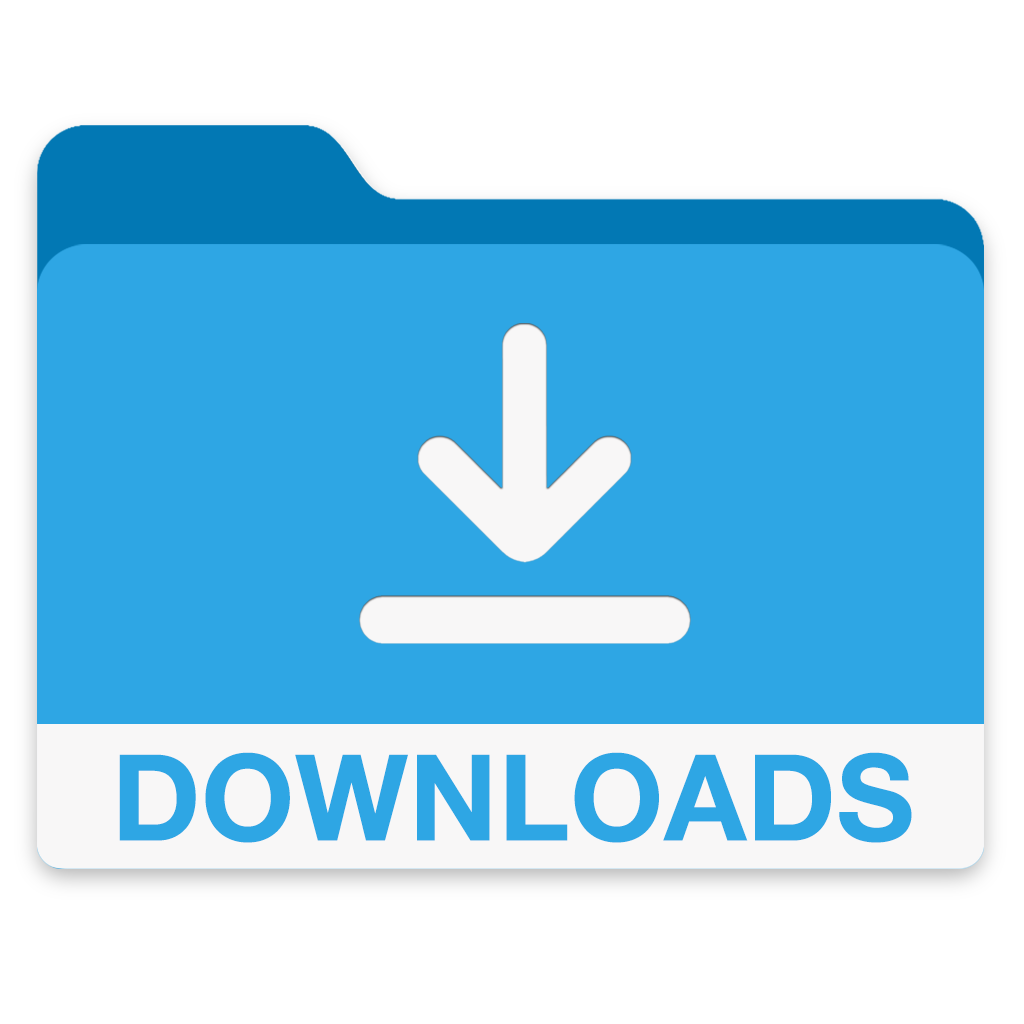
<style>
.page{position:relative;width:1024px;height:1024px;background:#2ea6e4}
.page>*{position:absolute;margin:0}
.t1{font:120px "HelveticaNeue-Bold";letter-spacing:0.005em;color:#2ea6e4}
</style>
<div class="page">
<p class="t1" style="left:119px;top:752px;width:793px;height:91px">DOWNLOADS</p>
</div>
